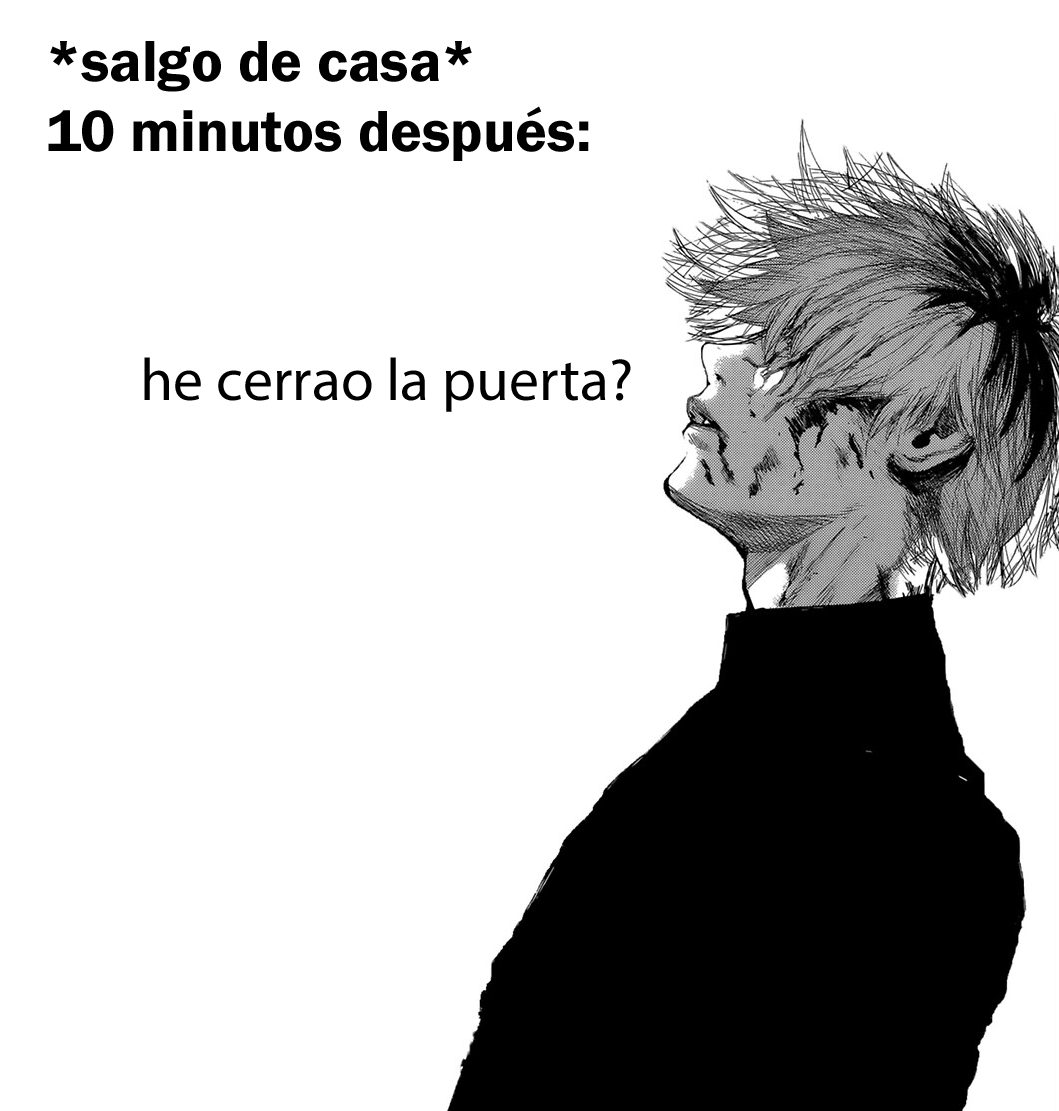
<style>
.page{position:relative;width:1059px;height:1111px;background:#ffffff}
.page>*{position:absolute;margin:0}
.t1{font:60px "FranklinGothic-Demi";color:#000000}
.t2{font:59.9px "MyriadPro-Regular";color:#000000}
</style>
<div class="page">
<p class="t1" style="left:48px;top:41px;width:541px;height:120px">*salgo de casa*<br>10 minutos después:</p>
<p class="t2" style="left:144px;top:357px;width:487px;height:55px">he cerrao la puerta?</p>
</div>
